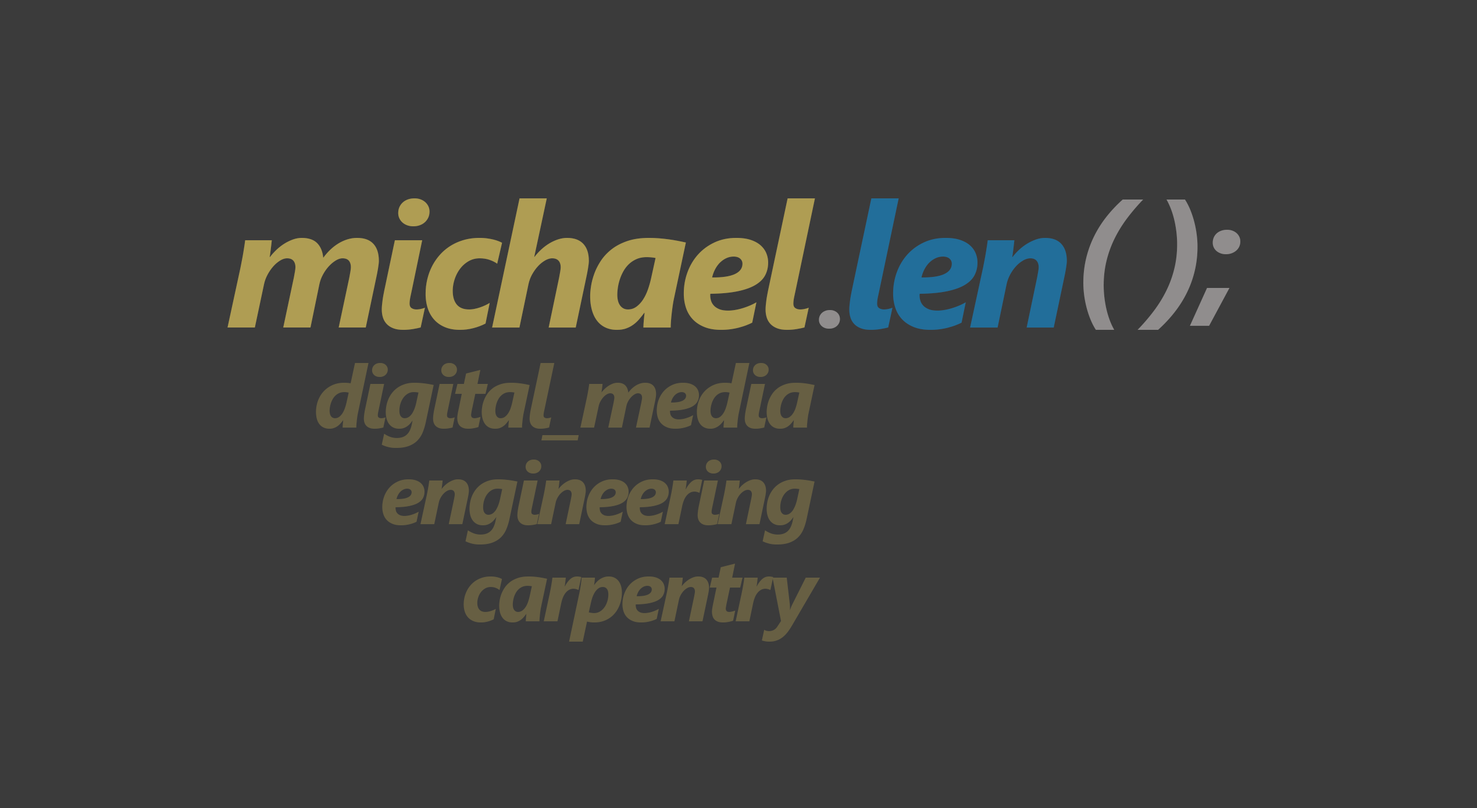
<style>
.page{position:relative;width:1477px;height:808px;background:#3b3b3b}
.page>*{position:absolute;margin:0}
.t1{font:174.4px "SegoeUI-BoldItalic";letter-spacing:-0.058em;color:#af9d53}
.t2{font:174.4px "SegoeUI-BoldItalic";letter-spacing:-0.058em;color:#226e9a}
.t3{font:116.3px "SegoeUI-BoldItalic";letter-spacing:-0.058em;color:#908d8d}
.t4{font:152.6px "SegoeUI-BoldItalic";letter-spacing:-0.058em;color:#908d8d}
.t5{font:87.2px/96.9px "SegoeUI-BoldItalic";letter-spacing:-0.058em;color:#675f43}
</style>
<div class="page">
<p class="t1" style="left:227px;top:198px;width:588px;height:132px">michael</p>
<p class="t2" style="left:819px;top:198px;width:248px;height:132px"><span class="t3">.</span>len</p>
<p class="t4" style="left:1083px;top:199px;width:157px;height:131px">( );</p>
<p class="t5" style="left:316px;top:363px;width:504px;height:278px;text-align:right">digital_media<br>engineering<br>carpentry</p>
</div>
